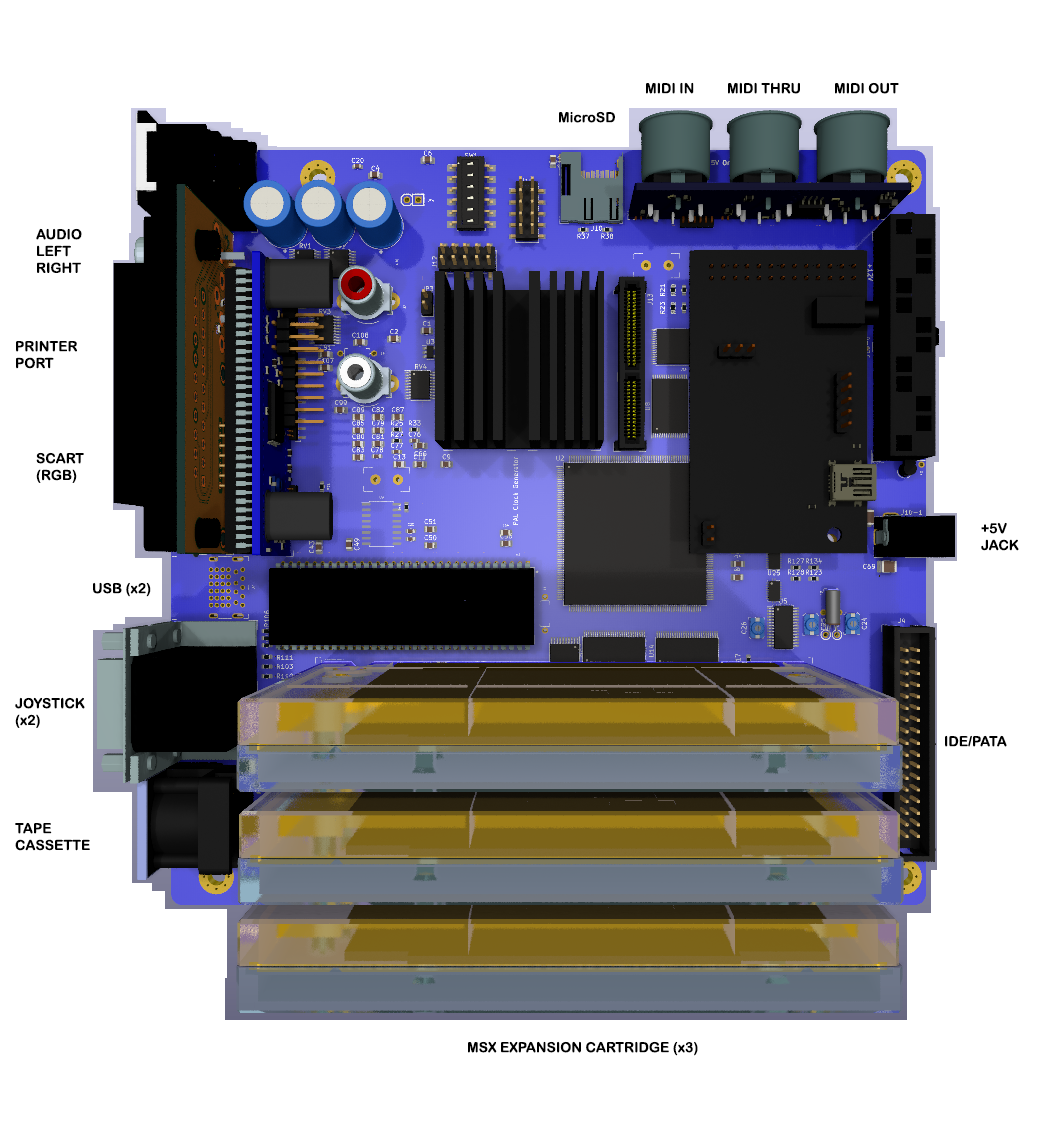
<style>
.page{position:relative;width:1044px;height:1122px;background:#ffffff}
.page>*{position:absolute;margin:0}
.t1{font:14px "ArialRoundedMTBold";color:#000000}
</style>
<div class="page">
<p class="t1" style="left:646px;top:82px;width:48px;height:12px">MIDI IN</p>
<p class="t1" style="left:728px;top:82px;width:72px;height:12px">MIDI THRU</p>
<p class="t1" style="left:835px;top:82px;width:64px;height:12px">MIDI OUT</p>
<p class="t1" style="left:559px;top:111px;width:56px;height:12px">MicroSD</p>
<p class="t1" style="left:36px;top:228px;width:46px;height:45px">AUDIO<br>LEFT<br>RIGHT</p>
<p class="t1" style="left:16px;top:340px;width:61px;height:29px">PRINTER<br>PORT</p>
<p class="t1" style="left:36px;top:452px;width:48px;height:31px">SCART<br>(RGB)</p>
<p class="t1" style="left:981px;top:522px;width:38px;height:29px">+5V <br>JACK</p>
<p class="t1" style="left:93px;top:582px;width:58px;height:15px">USB (x2)</p>
<p class="t1" style="left:15px;top:697px;width:70px;height:31px">JOYSTICK<br>(x2)</p>
<p class="t1" style="left:945px;top:735px;width:62px;height:12px">IDE/PATA</p>
<p class="t1" style="left:15px;top:822px;width:75px;height:29px">TAPE<br>CASSETTE</p>
<p class="t1" style="left:468px;top:1041px;width:230px;height:15px">MSX EXPANSION CARTRIDGE (x3)</p>
</div>
